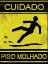
<style>
.page{position:relative;width:48px;height:64px}
.page>*{position:absolute;margin:0}
.t1{font:8.1px "ArialMT";color:#cec621;scale:1.06 1}
.t2{font:7.5px "ArialMT";color:#b1a91e;scale:0.79 1}
</style>
<div class="page">
<p class="t1" style="left:4px;top:4px;width:40px;height:6px">CUIDADO</p>
<p class="t2" style="left:1px;top:54px;width:46px;height:5px">PISO MOLHADO</p>
</div>
